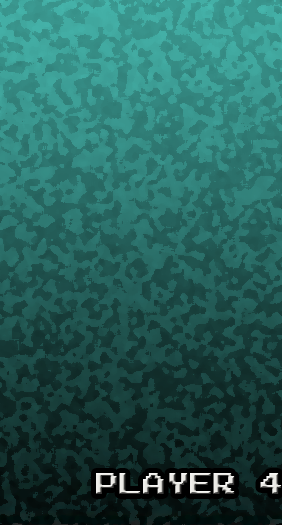
<style>
.page{position:relative;width:282px;height:525px}
.page>*{position:absolute;margin:0}
.t1{font:24px "ArcadeNormal"}
</style>
<div class="page">
<p class="t1" style="left:96px;top:473px;width:186px;height:21px">Player 4</p>
</div>
